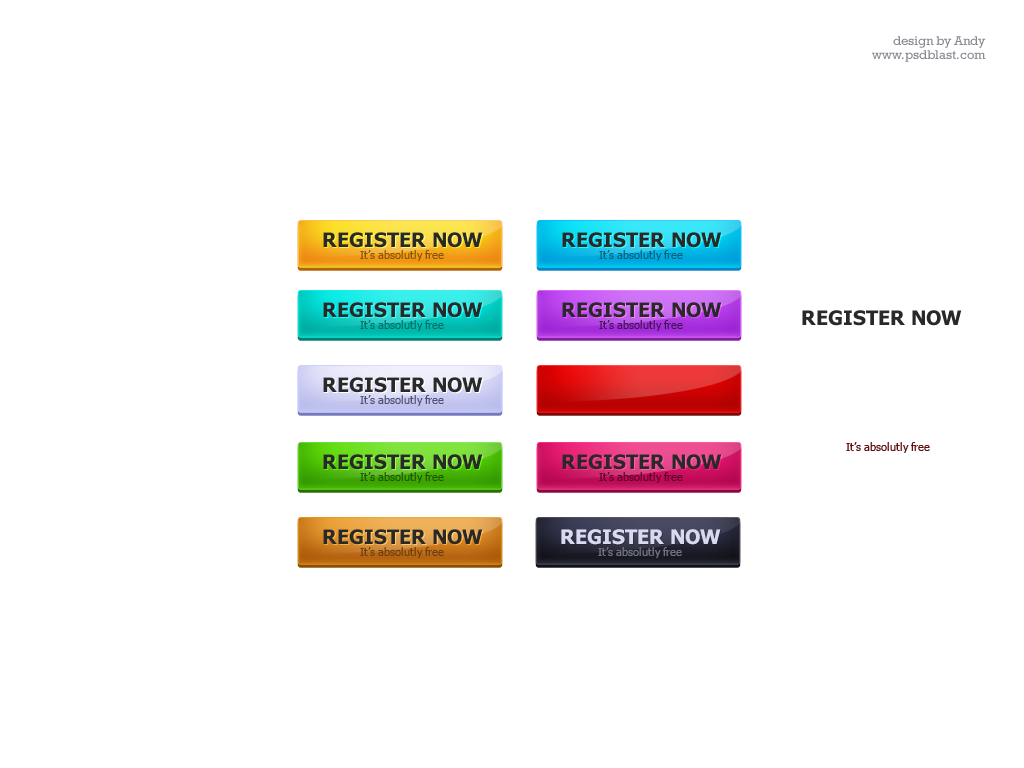
<style>
.page{position:relative;width:1024px;height:768px;background:#ffffff}
.page>*{position:absolute;margin:0}
.t1{font:20px "Tahoma-Bold";color:#292929;text-transform:uppercase}
.t2{font:11px "Tahoma";color:#88530a}
.t3{font:11px "Tahoma";color:#09607c}
.t4{font:11px "Tahoma";color:#066e66}
.t5{font:11px "Tahoma";color:#401452}
.t6{font:11px "Tahoma";color:#4f5077}
.t7{font:11px "Tahoma";color:#5f1010}
.t8{font:11px "Tahoma";color:#235507}
.t9{font:11px "Tahoma";color:#550526}
.t10{font:20px "Tahoma-Bold";color:#d8daf3;text-transform:uppercase}
.t11{font:11px "Tahoma";color:#6a3f14}
.t12{font:11px "Tahoma";color:#707184}
</style>
<div class="page">
<p class="t1" style="left:323px;top:232px;width:160px;height:16px">Register Now</p>
<p class="t1" style="left:562px;top:232px;width:160px;height:16px">Register Now</p>
<p class="t2" style="left:360px;top:250px;width:84px;height:11px">It’s absolutly free</p>
<p class="t3" style="left:599px;top:250px;width:84px;height:11px">It’s absolutly free</p>
<p class="t1" style="left:323px;top:302px;width:160px;height:16px">Register Now</p>
<p class="t1" style="left:562px;top:302px;width:160px;height:16px">Register Now</p>
<p class="t1" style="left:802px;top:310px;width:160px;height:16px">Register Now</p>
<p class="t4" style="left:360px;top:320px;width:84px;height:11px">It’s absolutly free</p>
<p class="t5" style="left:599px;top:320px;width:84px;height:11px">It’s absolutly free</p>
<p class="t1" style="left:323px;top:377px;width:160px;height:16px">Register Now</p>
<p class="t6" style="left:360px;top:395px;width:84px;height:11px">It’s absolutly free</p>
<p class="t7" style="left:846px;top:442px;width:84px;height:11px">It’s absolutly free</p>
<p class="t1" style="left:323px;top:454px;width:160px;height:16px">Register Now</p>
<p class="t1" style="left:562px;top:454px;width:160px;height:16px">Register Now</p>
<p class="t8" style="left:360px;top:472px;width:84px;height:11px">It’s absolutly free</p>
<p class="t9" style="left:599px;top:472px;width:84px;height:11px">It’s absolutly free</p>
<p class="t1" style="left:323px;top:529px;width:160px;height:16px">Register Now</p>
<p class="t10" style="left:561px;top:529px;width:160px;height:16px">Register Now</p>
<p class="t11" style="left:360px;top:547px;width:84px;height:11px">It’s absolutly free</p>
<p class="t12" style="left:598px;top:547px;width:84px;height:11px">It’s absolutly free</p>
</div>
